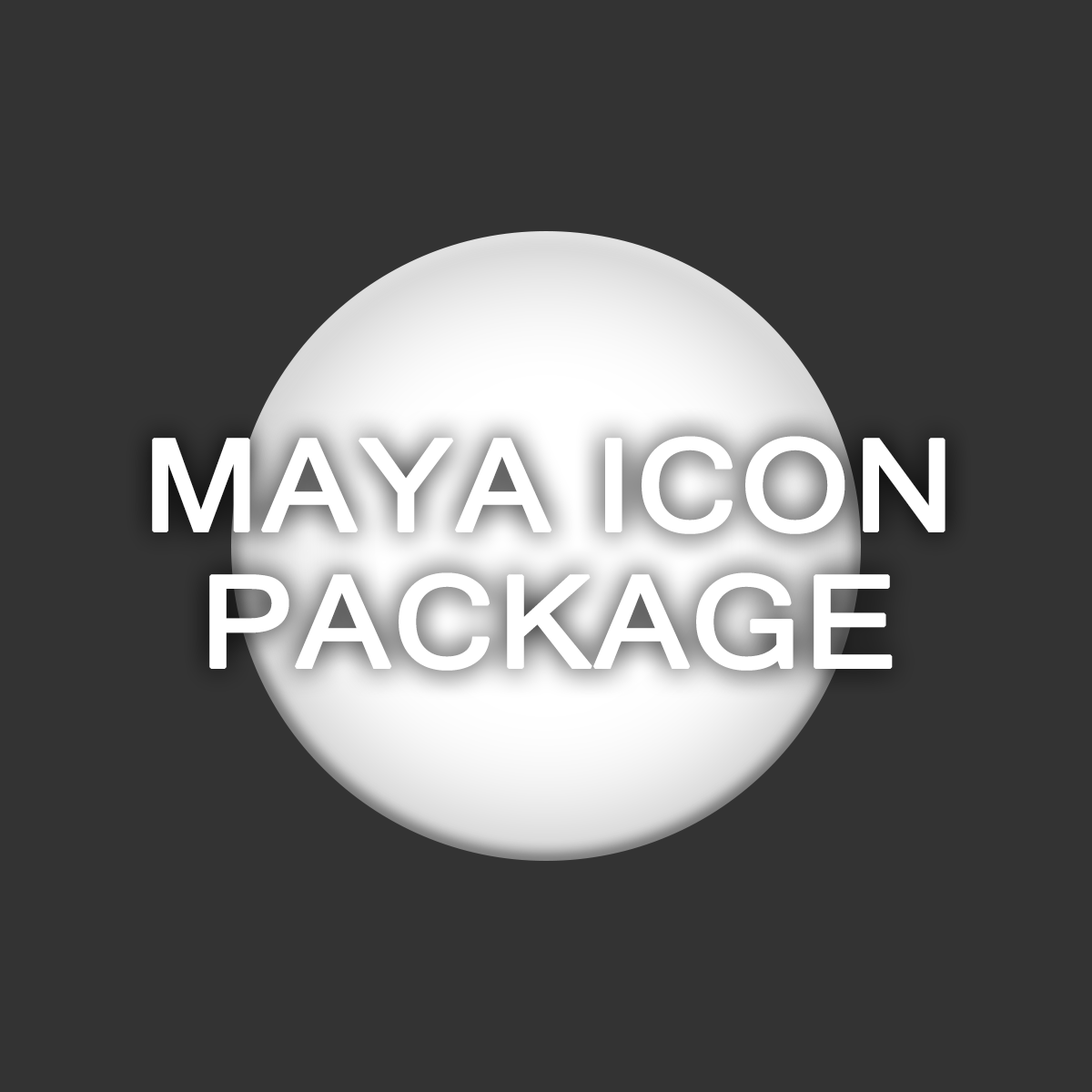
<style>
.page{position:relative;width:1092px;height:1092px;background:#333333}
.page>*{position:absolute;margin:0}
.t1{font:126.8px/136.5px "MicrosoftSansSerif";color:#ffffff;font-weight:bold;scale:1.1 1}
</style>
<div class="page">
<p class="t1" style="left:152px;top:436px;width:793px;height:235px;text-align:center">MAYA ICON<br>PACKAGE</p>
</div>
